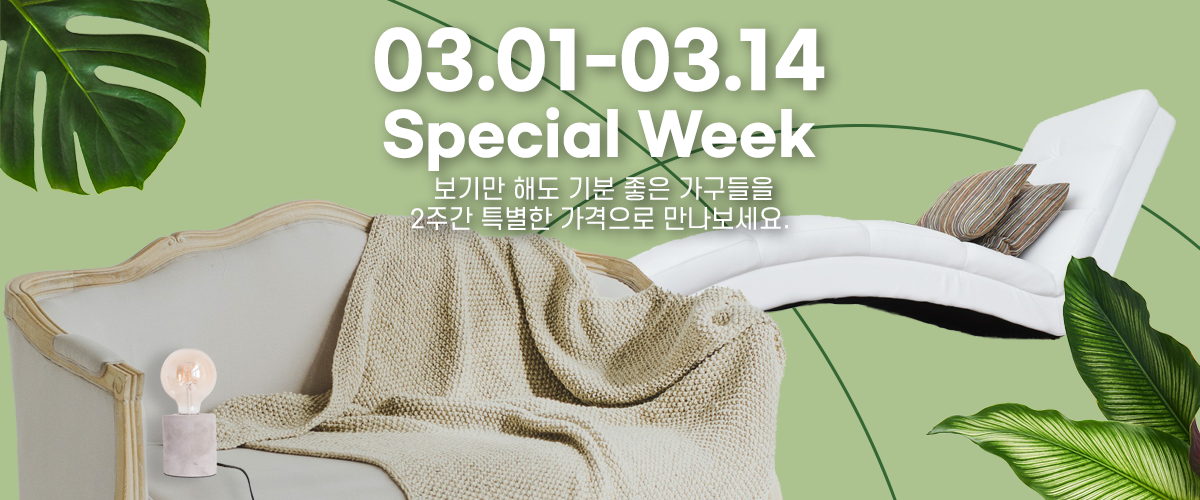
<style>
.page{position:relative;width:1200px;height:500px;background:#acc28f}
.page>*{position:absolute;margin:0}
.t1{font:57px "GmarketSansTTFBold";color:#ffffff}
.t2{font:75px "GmarketSansTTFBold";color:#ffffff}
.t3{font:25px "S-CoreDream-4Regular";color:#ffffff}
</style>
<div class="page">
<p class="t1" style="left:374px;top:27px;width:451px;height:144px;text-align:center"><span class="t2">03.01-03.14<br></span>Special Week</p>
<p class="t3" style="left:411px;top:176px;width:377px;height:54px;text-align:center">보기만 해도 기분 좋은 가구들을<br>2주간 특별한 가격으로 만나보세요.</p>
</div>
